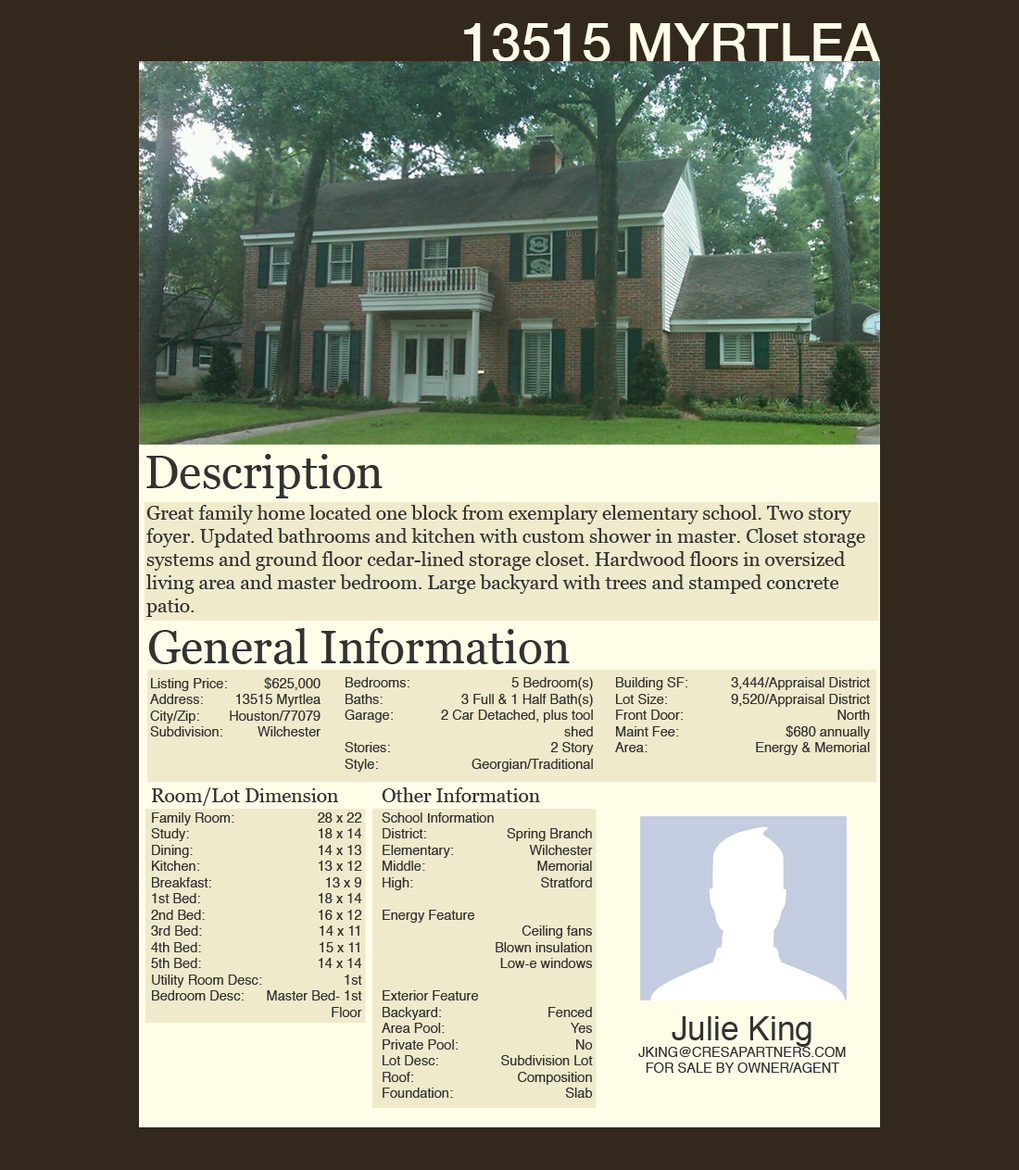
<style>
.page{position:relative;width:1019px;height:1170px;background:#32281c}
.page>*{position:absolute;margin:0}
.t1{font:54px "HelveticaNeue-Medium";color:#fffce8}
.t2{font:46.3px "Georgia";color:#323232}
.t3{font:19.3px "Georgia";color:#323232}
.t4{font:13.5px "Helvetica";color:#323232}
.t5{font:32.8px "Helvetica";color:#323232}
</style>
<div class="page">
<p class="t1" style="left:464px;top:23px;width:417px;height:39px">13515 MYRTLEA</p>
<p class="t2" style="left:146px;top:454px;width:237px;height:44px">Description</p>
<p class="t3" style="left:145px;top:505px;width:720px;height:112px">Great family home located one block from exemplary elementary school. Two story foyer. Updated bathrooms and kitchen with custom shower in master. Closet storage systems and ground floor cedar-lined storage closet. Hardwood floors in oversized living area and master bedroom. Large backyard with trees and stamped concrete patio.</p>
<p class="t2" style="left:148px;top:628px;width:422px;height:36px">General Information</p>
<p class="t4" style="left:150px;top:677px;width:171px;height:60px;text-align:right">Listing Price:  $625,000<br>Address: 13515 Myrtlea<br>City/Zip: Houston/77079<br>Subdivision: Wilchester</p>
<p class="t4" style="left:345px;top:677px;width:249px;height:95px;text-align:right">Bedrooms: 5 Bedroom(s)<br>Baths: 3 Full &amp; 1 Half Bath(s)<br>Garage: 2 Car Detached, plus tool shed<br>Stories: 2 Story<br>Style: Georgian/Traditional<br>Year Built: 1968</p>
<p class="t4" style="left:615px;top:677px;width:255px;height:78px;text-align:right">Building SF: 3,444/Appraisal District<br>Lot Size: 9,520/Appraisal District<br>Front Door: North<br>Maint Fee: $680 annually<br>Area:  Energy &amp; Memorial</p>
<p class="t3" style="left:151px;top:787px;width:188px;height:19px">Room/Lot Dimension</p>
<p class="t3" style="left:382px;top:787px;width:158px;height:15px">Other Information</p>
<p class="t4" style="left:151px;top:812px;width:211px;height:205px;text-align:right">Family Room:  28 x 22<br>Study:   18 x 14<br>Dining:   14 x 13<br>Kitchen:    13 x 12<br>Breakfast:  13 x 9<br>1st Bed:   18 x 14<br>2nd Bed:   16 x 12<br>3rd Bed:    14 x 11<br>4th Bed:    15 x 11<br>5th Bed:   14 x 14<br>Utility Room Desc: 1st <br>Bedroom Desc: Master Bed- 1st Floor</p>
<p class="t4" style="left:382px;top:812px;width:211px;height:286px">School Information<br>District: Spring Branch<br>Elementary: Wilchester<br>Middle: Memorial <br>High: Stratford<br><br>Energy Feature<br>Ceiling fans <br>Blown insulation<br>Low-e windows<br><br>Exterior Feature<br>Backyard: Fenced<br>Area Pool: Yes<br>Private Pool: No<br>Lot Desc: Subdivision Lot<br>Roof:  Composition<br>Foundation: Slab</p>
<p class="t4" style="left:638px;top:1016px;width:208px;height:57px;text-align:center"><span class="t5">Julie King<br></span>JKING@CRESAPARTNERS.COM<br>FOR SALE BY OWNER/AGENT</p>
</div>
